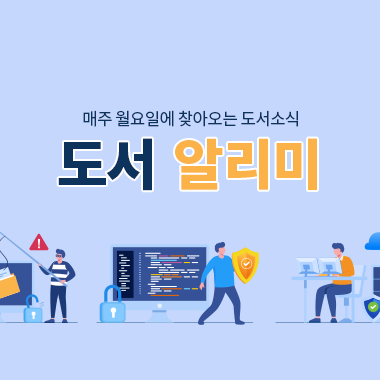
<style>
.page{position:relative;width:380px;height:380px;background:#c5d7fc}
.page>*{position:absolute;margin:0}
.t1{font:17px "NotoSansCJKkr-Regular";letter-spacing:-0.025em;color:#0d335d}
.t2{font:55px "NotoSansCJKkr-Black";letter-spacing:-0.025em;color:#0d335d}
.t3{font:55px "NotoSansCJKkr-Black";letter-spacing:-0.025em;color:#fbb349}
</style>
<div class="page">
<p class="t1" style="left:83px;top:110px;width:215px;height:17px">매주 월요일에 찾아오는 도서소식</p>
<p class="t2" style="left:58px;top:138px;width:94px;height:53px">도서</p>
<p class="t3" style="left:175px;top:138px;width:142px;height:52px">알리미</p>
</div>
